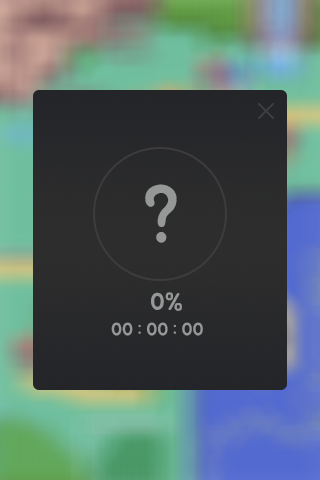
<style>
.page{position:relative;width:320px;height:480px}
.page>*{position:absolute;margin:0}
.t1{font:72px "BMJUA";color:#969797}
.t2{font:24px "BMJUA";color:#969797}
.t3{font:18px "BMJUA";color:#969797}
</style>
<div class="page">
<p class="t1" style="left:145px;top:184px;width:32px;height:59px">?</p>
<p class="t2" style="left:151px;top:292px;width:31px;height:19px">0%</p>
<p class="t3" style="left:111px;top:322px;width:92px;height:14px">00 : 00 : 00</p>
</div>
